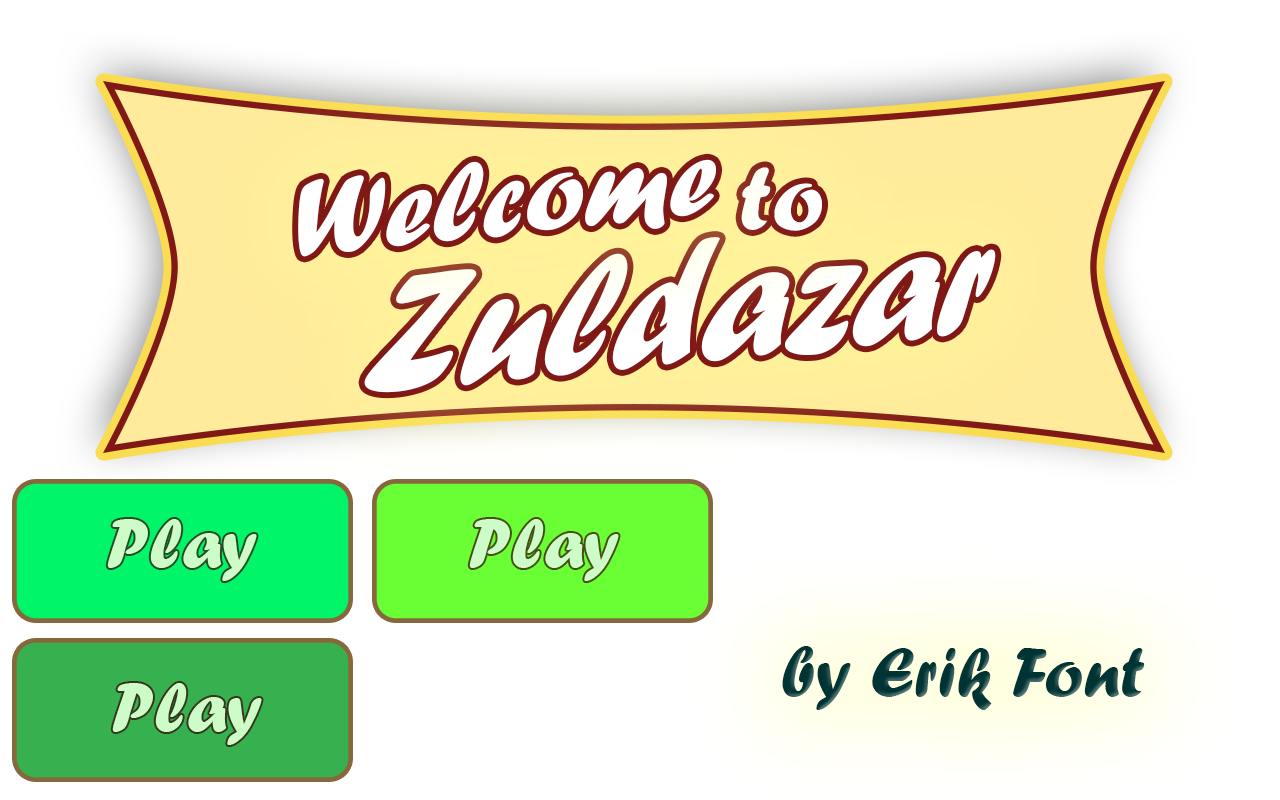
<style>
.page{position:relative;width:1280px;height:800px;background:#ffffff}
.page>*{position:absolute;margin:0}
.t1{font:114.3px "ForteMT";color:#ffffff}
.t2{font:95.8px "ForteMT";color:#fffffc}
.t3{font:180.3px "ForteMT";color:#ffffff;scale:0.86 1}
.t4{font:72px "ForteMT";color:#cdfcc8}
.t5{font:72px "ForteMT";color:#003333}
</style>
<div class="page">
<p class="t1" style="left:298px;top:159px;width:418px;height:98px;rotate:-6deg">Welcome</p>
<p class="t2" style="left:741px;top:167px;width:81px;height:64px;rotate:-1deg">to</p>
<p class="t3" style="left:364px;top:237px;width:632px;height:156px;rotate:-6deg">Zuldazar</p>
<p class="t4" style="left:107px;top:519px;width:150px;height:62px">Play</p>
<p class="t4" style="left:469px;top:519px;width:150px;height:62px">Play</p>
<p class="t5" style="left:782px;top:646px;width:363px;height:64px">by Erik Font</p>
<p class="t4" style="left:112px;top:683px;width:150px;height:62px">Play</p>
</div>
